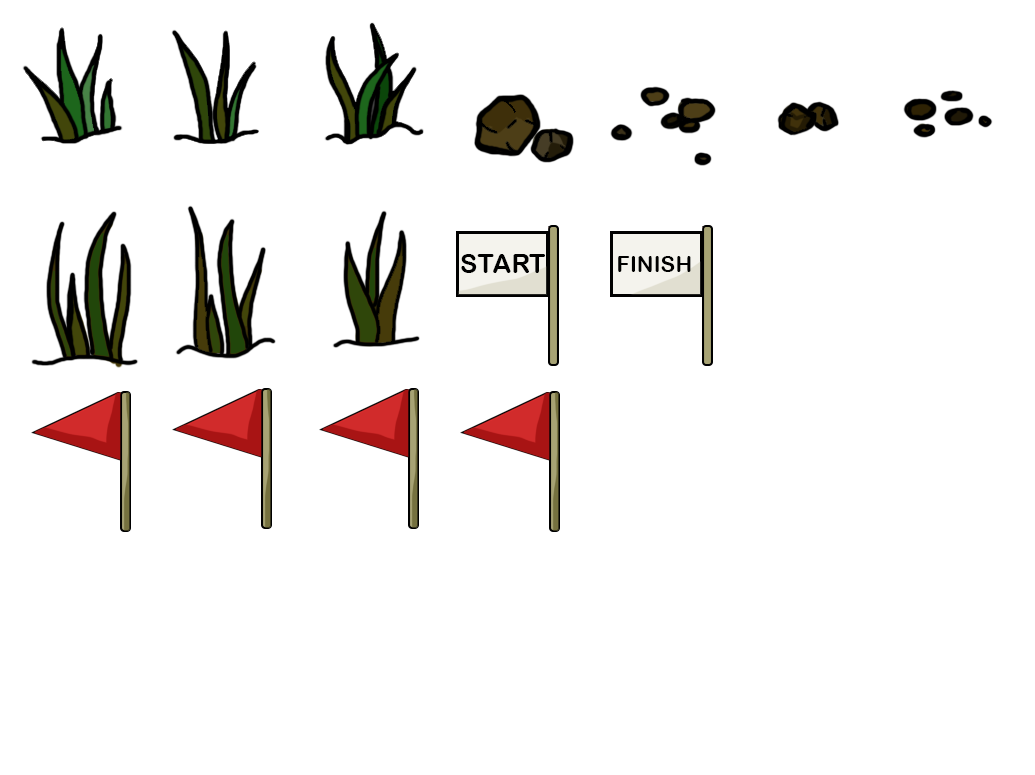
<style>
.page{position:relative;width:1035px;height:775px;background:#ffffff}
.page>*{position:absolute;margin:0}
.t1{font:26.3px "ArialRoundedMTBold";color:#000000}
.t2{font:22.2px "ArialRoundedMTBold";color:#000000}
</style>
<div class="page">
<p class="t1" style="left:461px;top:254px;width:84px;height:19px">START</p>
<p class="t2" style="left:618px;top:256px;width:73px;height:16px">FINISH</p>
</div>
